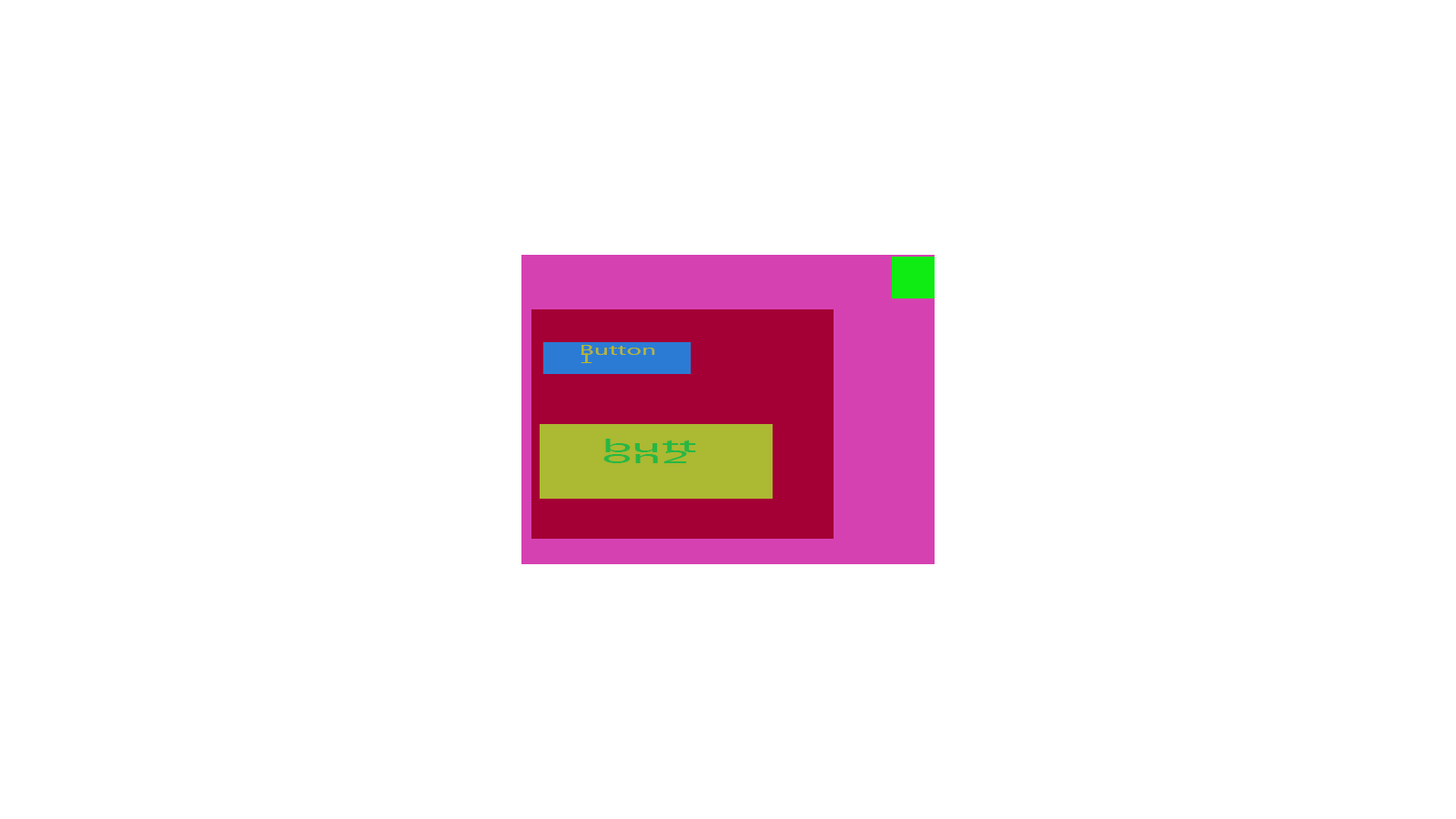
<style>
.page{position:relative;width:1456px;height:819px;background:#ffffff}
.page>*{position:absolute;margin:0}
.t1{font:13px "MicrosoftYaHei";color:#bbb62d;scale:1.84 1}
.t2{font:17.5px "MicrosoftYaHei";color:#28b743;scale:2.73 1}
</style>
<div class="page">
<p class="t1" style="left:581px;top:345px;width:74px;height:18px">Button1</p>
<p class="t2" style="left:603px;top:439px;width:93px;height:24px">button2</p>
</div>
